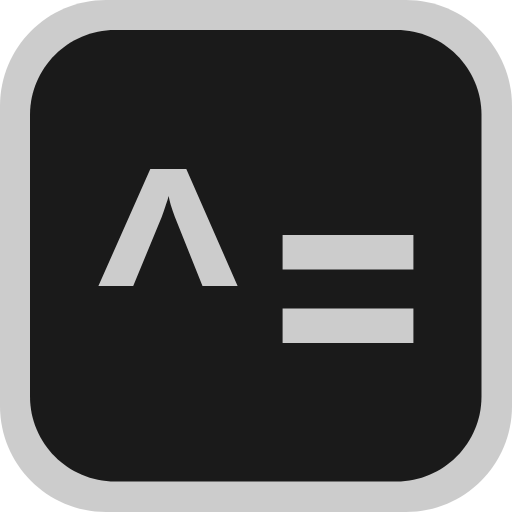
<style>
.page{position:relative;width:512px;height:512px;background:#1a1a1a}
.page>*{position:absolute;margin:0}
.t1{font:300px "JetBrainsMono-Bold";color:#cccccc}
</style>
<div class="page">
<p class="t1" style="left:98px;top:169px;width:316px;height:174px">^=</p>
</div>
